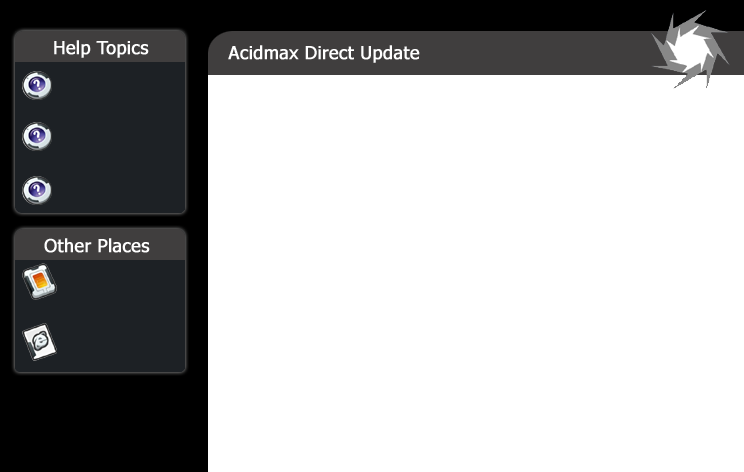
<style>
.page{position:relative;width:744px;height:472px;background:#ffffff}
.page>*{position:absolute;margin:0}
.t1{font:18px "Tahoma";color:#ffffff;font-weight:bold}
</style>
<div class="page">
<p class="t1" style="left:54px;top:40px;width:95px;height:18px">Help Topics</p>
<p class="t1" style="left:228px;top:45px;width:192px;height:18px">Acidmax Direct Update</p>
<p class="t1" style="left:44px;top:238px;width:106px;height:15px">Other Places</p>
</div>
